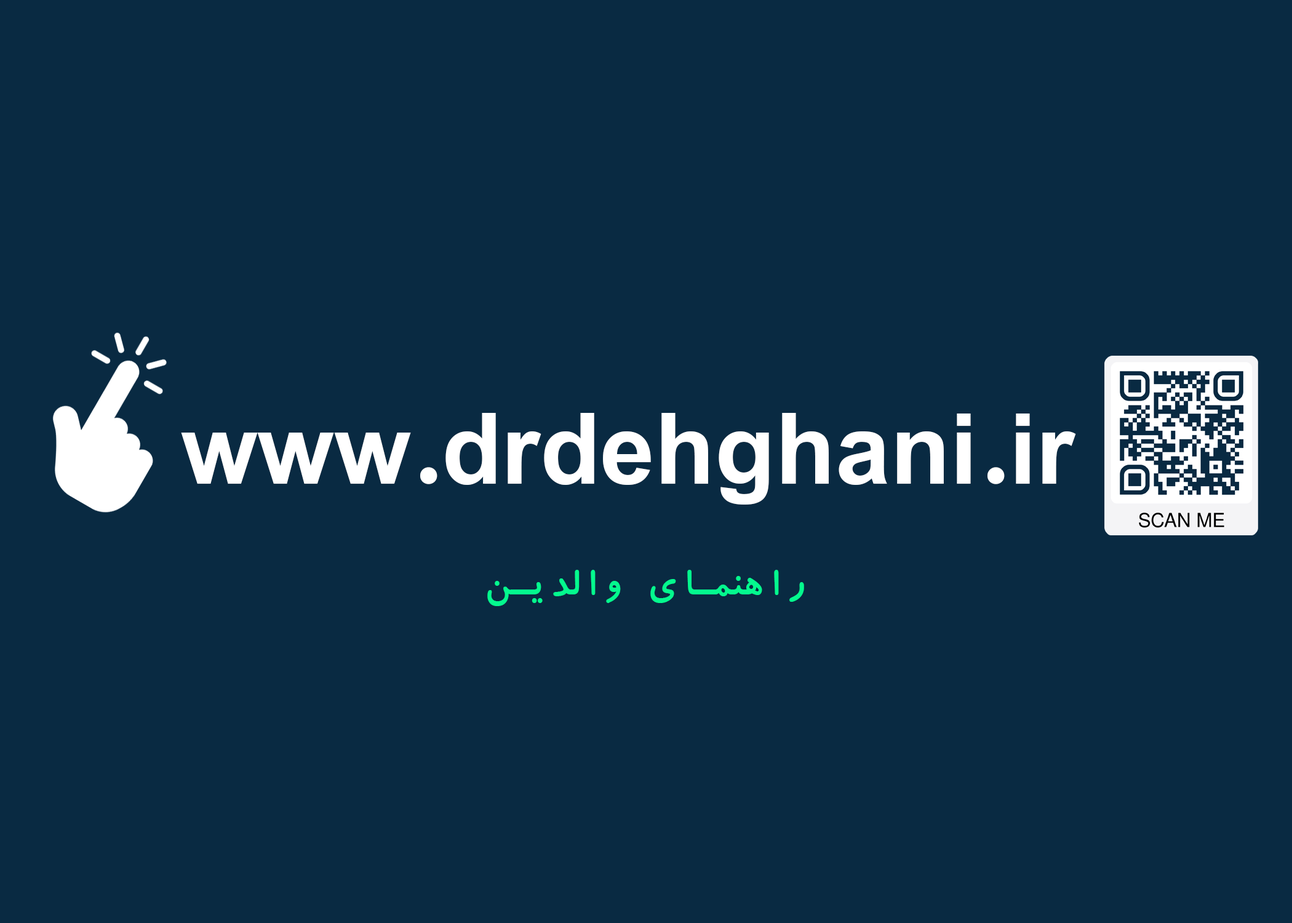
<style>
.page{position:relative;width:1292px;height:923px;background:#092a42}
.page>*{position:absolute;margin:0}
.t1{font:123.1px "IRKoodak";color:#ffffff}
.t2{font:41px "IRKoodak";letter-spacing:0.2em;color:#04f98e}
</style>
<div class="page">
<p class="t1" style="left:181px;top:413px;width:895px;height:92px">www.drdehghani.ir</p>
<p class="t2" style="left:487px;top:570px;width:317px;height:36px">راهنمای والدین</p>
</div>
